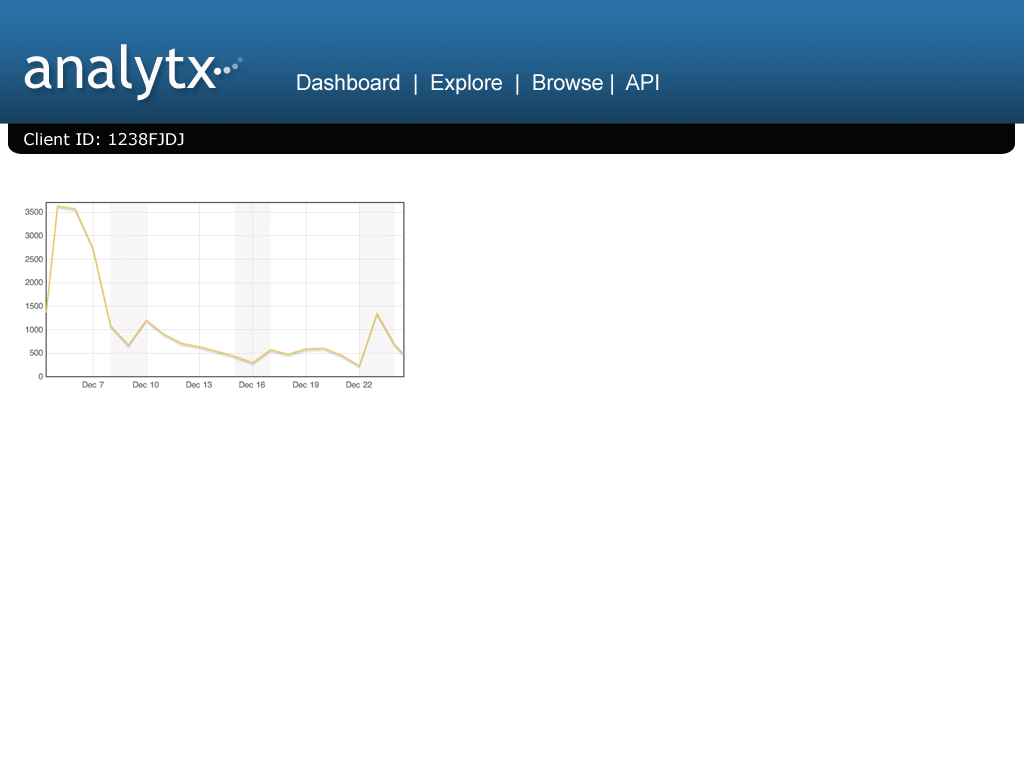
<style>
.page{position:relative;width:1024px;height:768px;background:#ffffff}
.page>*{position:absolute;margin:0}
.t1{font:59.6px "TrebuchetMS";letter-spacing:-0.005em;color:#fcfafa}
.t2{font:21.7px "ArialMT";letter-spacing:-0.005em;color:#fbfcfc}
.t3{font:16.2px "Verdana";letter-spacing:-0.005em;color:#ffffff}
</style>
<div class="page">
<p class="t1" style="left:24px;top:44px;width:192px;height:57px">analytx</p>
<p class="t2" style="left:297px;top:74px;width:362px;height:21px">Dashboard  |  Explore  |  Browse |  API</p>
<p class="t3" style="left:24px;top:132px;width:160px;height:14px">Client ID: 1238FJDJ</p>
</div>
